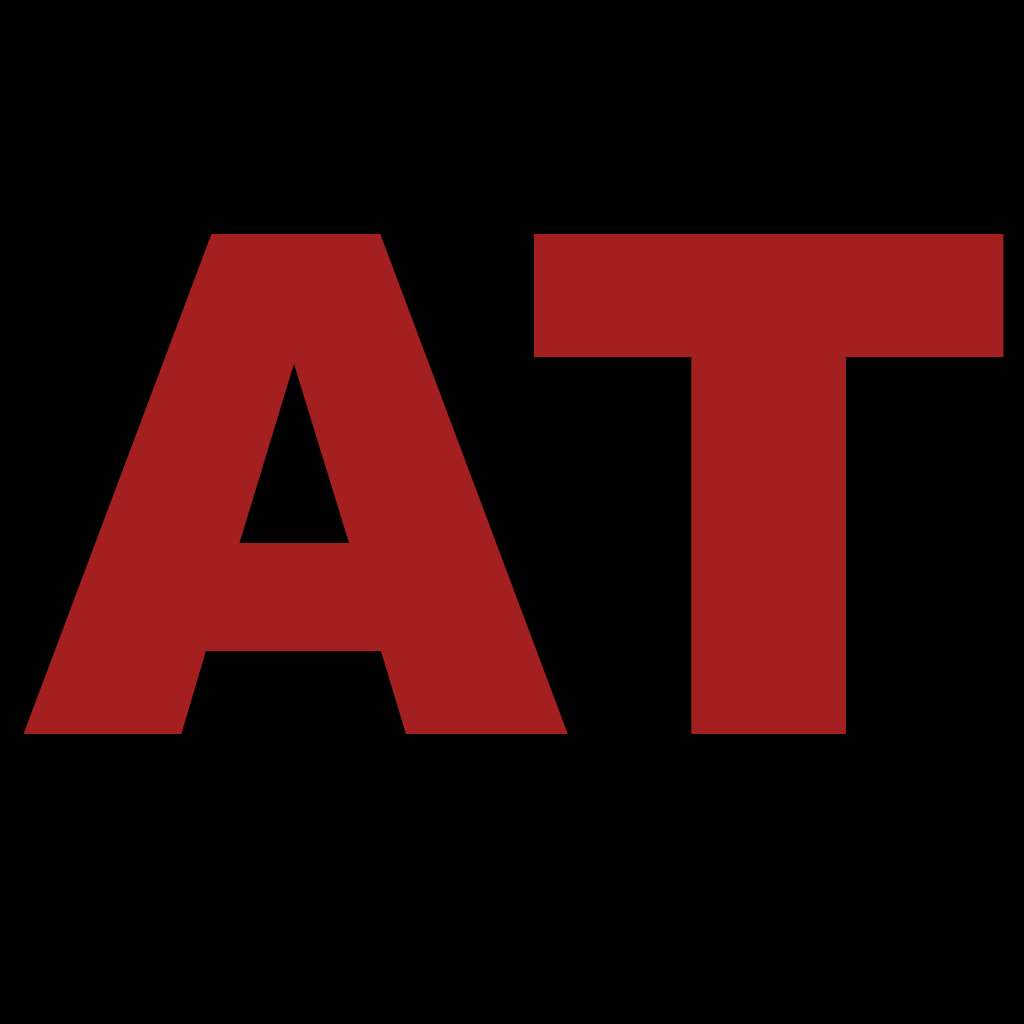
<style>
.page{position:relative;width:1024px;height:1024px;background:#000000}
.page>*{position:absolute;margin:0}
.t1{font:698px "Arial-Black";color:#a41f1f}
</style>
<div class="page">
<p class="t1" style="left:23px;top:234px;width:981px;height:500px">AT</p>
</div>
